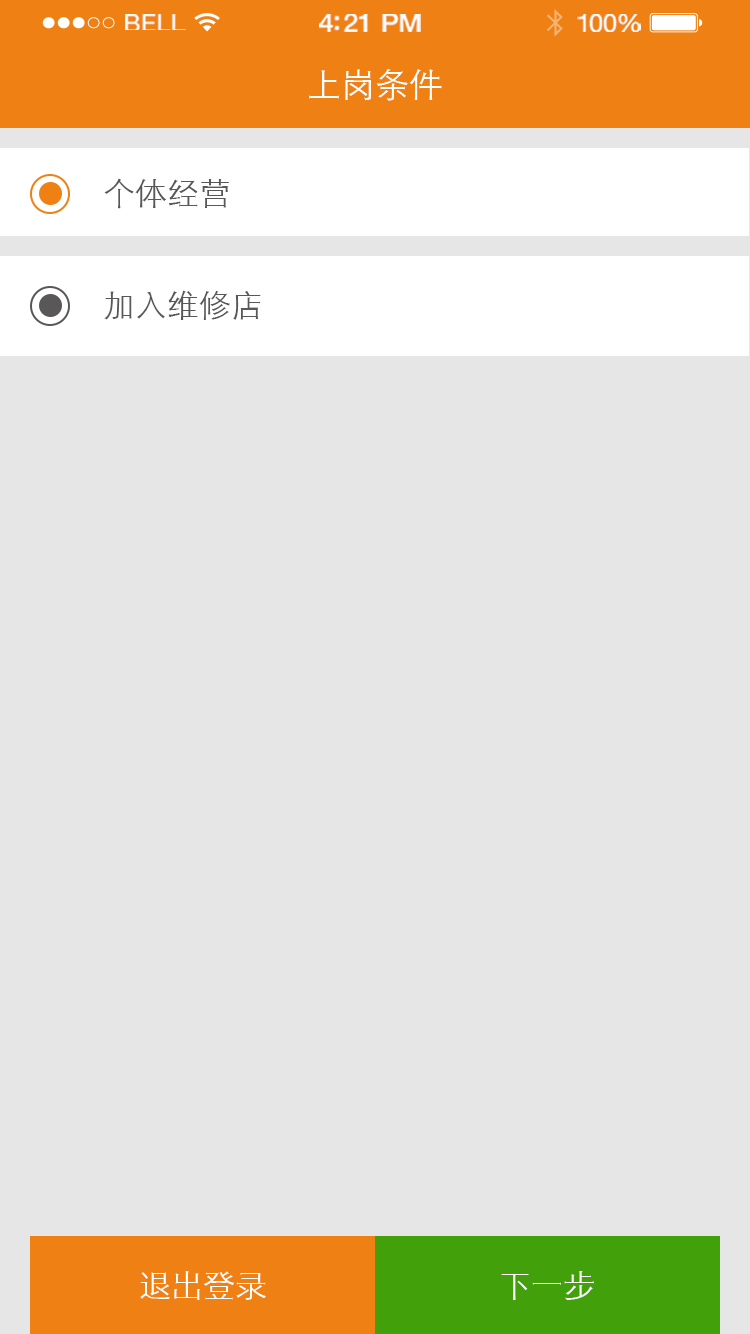
<style>
.page{position:relative;width:750px;height:1334px;background:#e6e6e6}
.page>*{position:absolute;margin:0}
.t1{font:23.3px "HelveticaNeue";letter-spacing:0.02em;color:#ffffff;scale:1.06 1}
.t2{font:25.3px "HelveticaNeue-Medium";letter-spacing:-0.02em;color:#ffffff;scale:1.06 1}
.t3{font:24.3px "HelveticaNeue";letter-spacing:-0.02em;color:#ffffff;scale:1.06 1}
.t4{font:34px "STXihei";color:#ffffff}
.t5{font:32px "STXihei";color:#595757}
.t6{font:32px "STXihei";color:#ffffff}
</style>
<div class="page">
<p class="t1" style="left:125px;top:14px;width:61px;height:16px">BELL</p>
<p class="t2" style="left:319px;top:14px;width:102px;height:18px">4:21 PM</p>
<p class="t3" style="left:577px;top:14px;width:64px;height:18px">100%</p>
<p class="t4" style="left:309px;top:69px;width:133px;height:32px">上岗条件</p>
<p class="t5" style="left:104px;top:178px;width:125px;height:31px">个体经营</p>
<p class="t5" style="left:104px;top:290px;width:157px;height:30px">加入维修店</p>
<p class="t6" style="left:140px;top:1271px;width:126px;height:29px">退出登录</p>
<p class="t6" style="left:501px;top:1271px;width:93px;height:29px">下一步</p>
</div>
